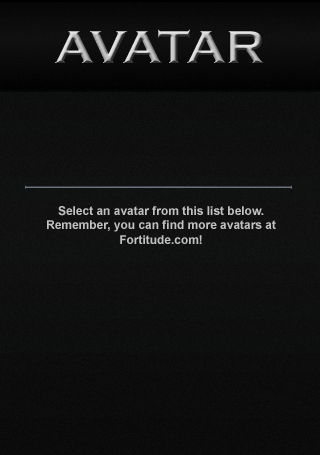
<style>
.page{position:relative;width:320px;height:455px}
.page>*{position:absolute;margin:0}
.t1{font:47.8px "CopperplateGothic-Bold"}
.t2{font:12px "Arial-BoldMT";color:#c1c1c1}
</style>
<div class="page">
<p class="t1" style="left:55px;top:29px;width:209px;height:34px">AVATAR</p>
<p class="t2" style="left:47px;top:206px;width:229px;height:38px;text-align:center">Select an avatar from this list below.<br>Remember, you can find more avatars at<br>Fortitude.com!</p>
</div>
